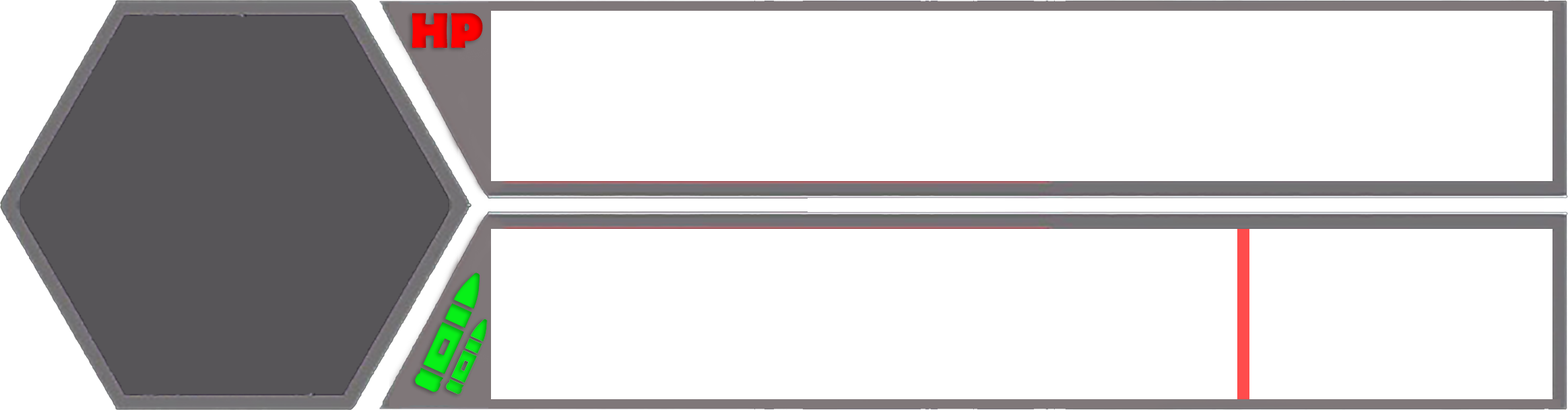
<style>
.page{position:relative;width:1568px;height:410px;background:#ffffff}
.page>*{position:absolute;margin:0}
.t1{font:50.5px "BerlinSansFB-Bold";color:#ff0000}
</style>
<div class="page">
<p class="t1" style="left:412px;top:13px;width:71px;height:35px">HP</p>
</div>
